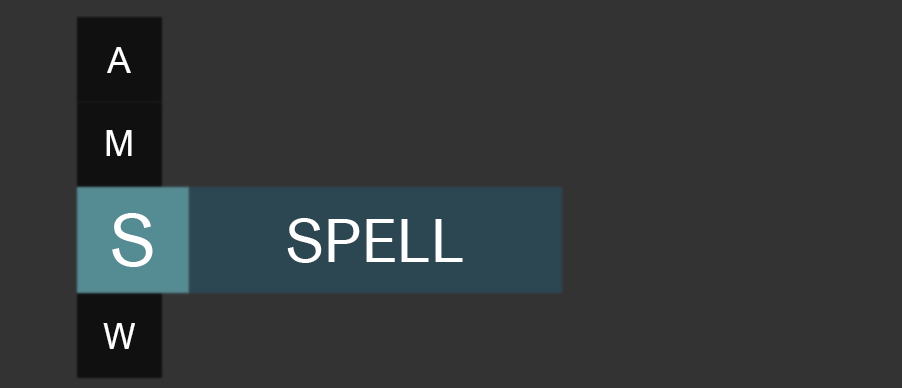
<style>
.page{position:relative;width:902px;height:388px;background:#333333}
.page>*{position:absolute;margin:0}
.t1{font:36px "ArialNova";color:#ffffff}
.t2{font:72px "ArialNova";color:#ffffff}
.t3{font:60px "ArialNova";color:#ffffff}
</style>
<div class="page">
<p class="t1" style="left:107px;top:47px;width:24px;height:26px">A</p>
<p class="t1" style="left:106px;top:130px;width:26px;height:26px">M</p>
<p class="t2" style="left:112px;top:213px;width:41px;height:54px">S</p>
<p class="t3" style="left:287px;top:218px;width:176px;height:45px">SPELL</p>
<p class="t1" style="left:103px;top:323px;width:32px;height:26px">W</p>
</div>
